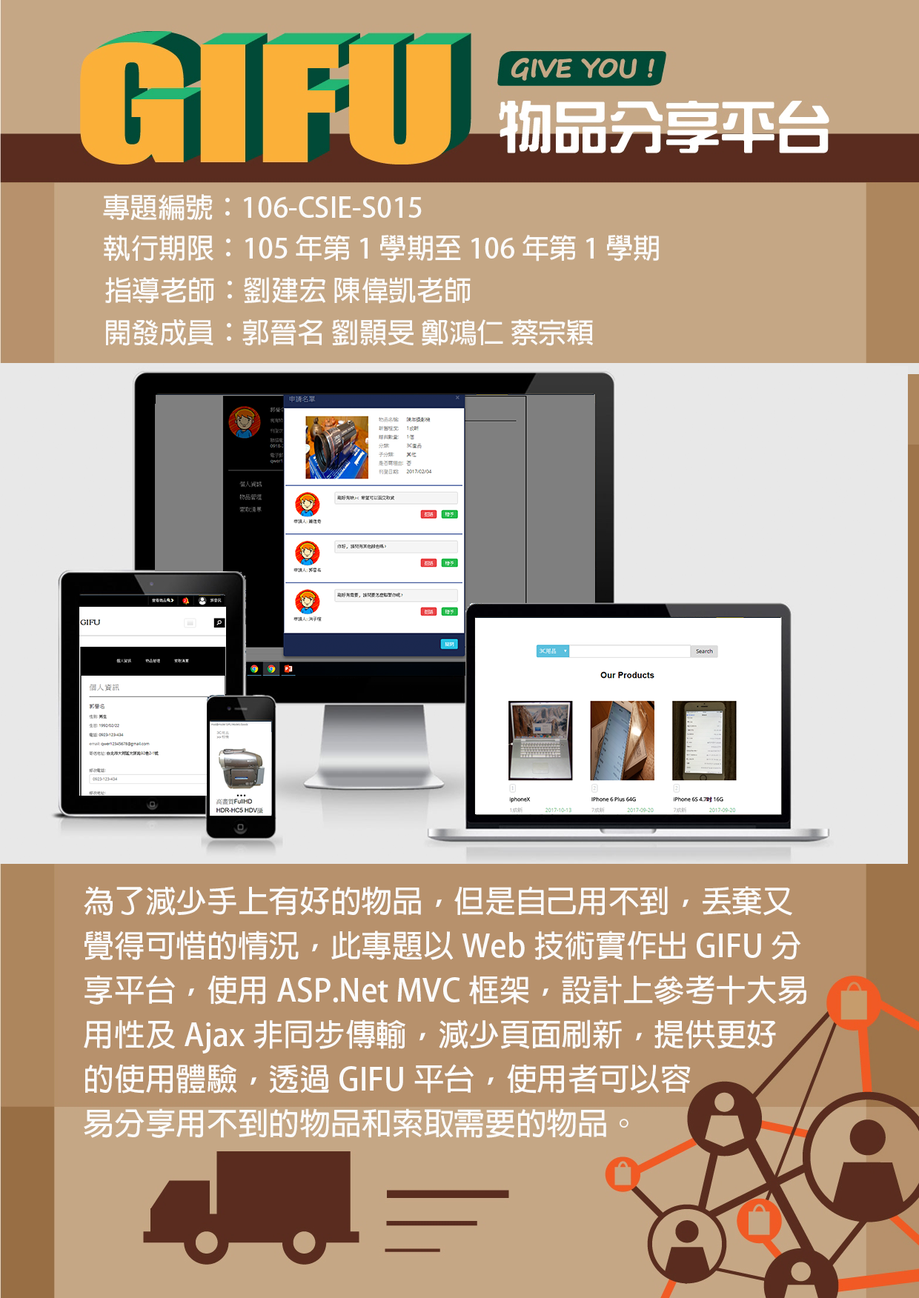
<style>
.page{position:relative;width:919px;height:1298px;background:#c5a785}
.page>*{position:absolute;margin:0}
.t1{font:27.8px "AdobeFanHeitiStd-Bold";color:#fbfbfb}
.t2{font:30.9px/44.5px "AdobeFanHeitiStd-Bold";color:#fbfbfb}
</style>
<div class="page">
<p class="t1" style="left:103px;top:194px;width:319px;height:27px">專題編號：106-CSIE-S015</p>
<p class="t1" style="left:104px;top:235px;width:555px;height:27px">執行期限：105 年第 1 學期至 106 年第 1 學期</p>
<p class="t1" style="left:105px;top:277px;width:365px;height:27px">指導老師：劉建宏 陳偉凱老師</p>
<p class="t1" style="left:106px;top:319px;width:487px;height:27px">開發成員： 郭晉名 劉顥旻 鄭鴻仁 蔡宗穎</p>
<p class="t2" style="left:84px;top:886px;width:722px;height:252px">為了減少手上有好的物品，但是自己用不到，丟棄又<br>覺得可惜的情況，此專題以Web技術實作出GIFU分<br>享平台，使用ASP.Net MVC框架，設計上參考十大易<br>用性及Ajax非同步傳輸，減少頁面刷新，提供更好<br>的使用體驗，透過GIFU平台，使用者可以容<br>易分享用不到的物品和索取需要的物品。</p>
</div>
